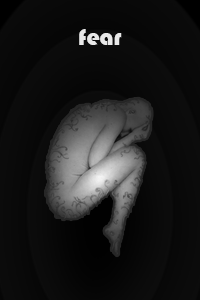
<style>
.page{position:relative;width:200px;height:300px}
.page>*{position:absolute;margin:0}
.t1{font:24px "Bauhaus93";color:#e8e8e8}
</style>
<div class="page">
<p class="t1" style="left:79px;top:29px;width:43px;height:16px">fear</p>
</div>
